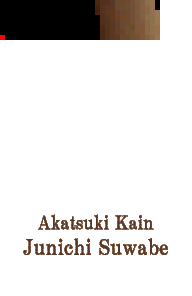
<style>
.page{position:relative;width:192px;height:296px;background:#ffffff}
.page>*{position:absolute;margin:0}
.t1{font:21.3px "HGPMinchoB";color:#583828}
.t2{font:18.7px "HGPMinchoB";color:#583828}
</style>
<div class="page">
<p class="t1" style="left:23px;top:214px;width:145px;height:41px;text-align:center"><span class="t2">Akatsuki Kain<br></span>Junichi Suwabe</p>
</div>
